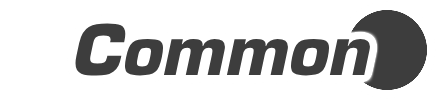
<style>
.page{position:relative;width:440px;height:100px;background:#ffffff}
.page>*{position:absolute;margin:0}
.t1{font:68px "Eurostile-BoldOblique";color:#3d3d3d}
</style>
<div class="page">
<p class="t1" style="left:75px;top:23px;width:295px;height:53px">Common</p>
</div>
